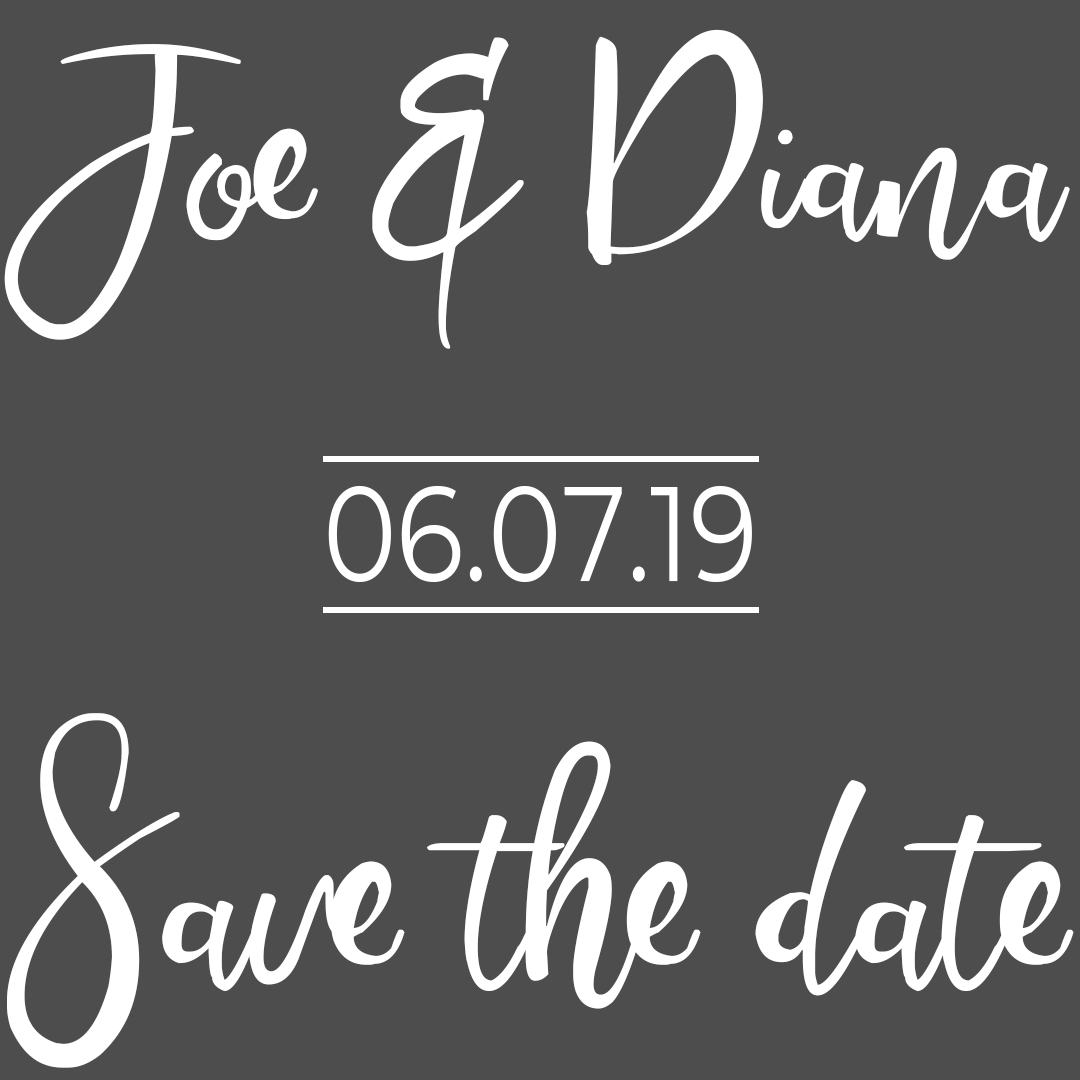
<style>
.page{position:relative;width:1080px;height:1080px;background:#4d4d4d}
.page>*{position:absolute;margin:0}
.t1{font:391.8px "Safirestone";color:#ffffff}
.t2{font:447.9px "Safirestone";color:#ffffff}
</style>
<div class="page">
<p class="t1" style="left:4px;top:29px;width:1066px;height:320px">Joe &amp; Diana</p>
<p class="t2" style="left:7px;top:713px;width:1067px;height:355px">Save the date</p>
</div>
